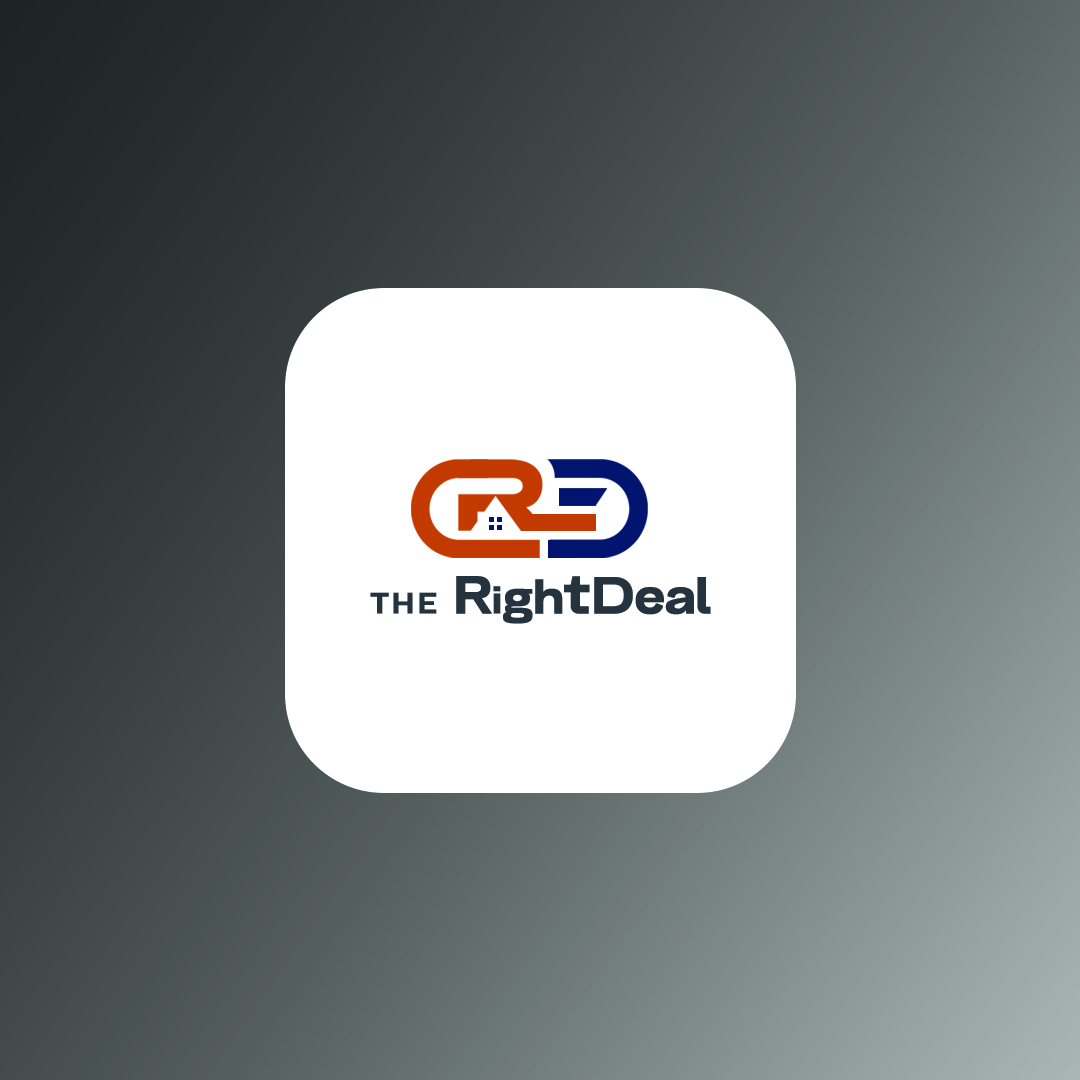
<style>
.page{position:relative;width:1080px;height:1080px}
.page>*{position:absolute;margin:0}
.t1{font:51.5px "BelfastGrotesk-Bold";letter-spacing:-0.025em;color:#25333e;font-weight:bold}
.t2{font:33.9px "ArquitectaW00-Heavy";letter-spacing:0.05em;color:#25333e;text-transform:uppercase;font-weight:bold}
.t3{font:52.8px "BelfastGrotesk-Bold";letter-spacing:-0.025em;color:#25333e;font-weight:bold}
.t4{font:39.2px "BelfastGrotesk-Bold";letter-spacing:-0.025em;color:#25333e;font-weight:bold}
.t5{font:48.3px "BelfastGrotesk-Bold";letter-spacing:-0.025em;color:#25333e;font-weight:bold}
.t6{font:57.3px "BelfastGrotesk-Bold";letter-spacing:-0.025em;color:#25333e;font-weight:bold}
</style>
<div class="page">
<p class="t1" style="left:370px;top:576px;width:341px;height:48px"><span class="t2">The </span><span class="t3">R</span><span class="t4">i</span><span class="t5">gh</span><span class="t6">t</span>Deal</p>
</div>
